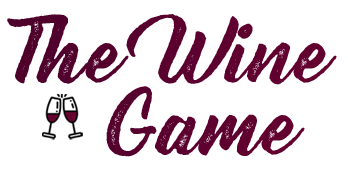
<style>
.page{position:relative;width:348px;height:170px;background:#ffffff}
.page>*{position:absolute;margin:0}
.t1{font:80px/72px "BernadetteRough";color:#63032e}
</style>
<div class="page">
<p class="t1" style="left:7px;top:14px;width:330px;height:143px;text-align:justify">The Wine<br>   Game</p>
</div>
